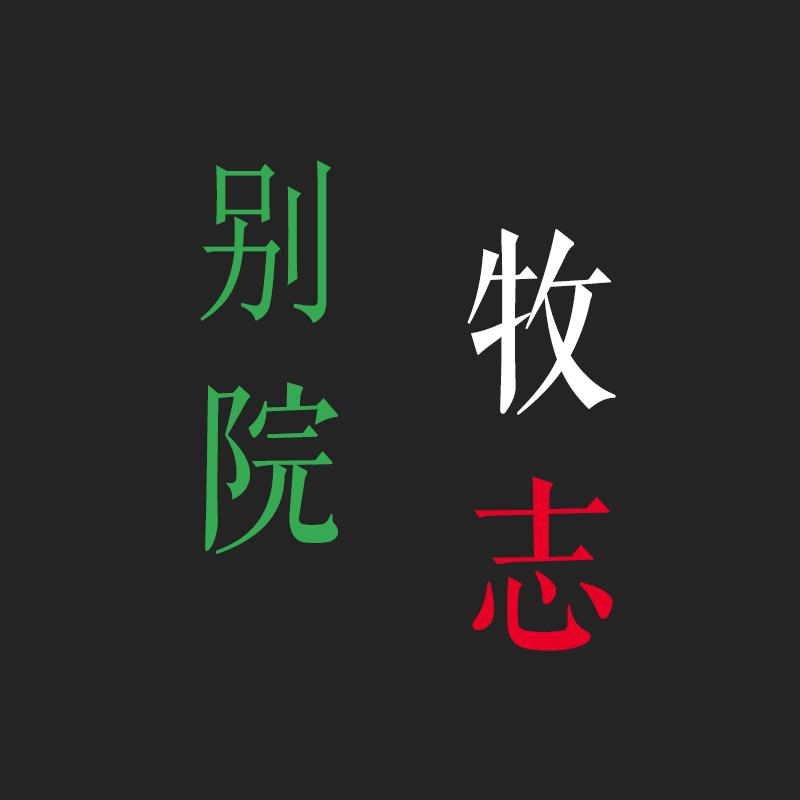
<style>
.page{position:relative;width:800px;height:800px;background:#242424}
.page>*{position:absolute;margin:0}
.t1{font:150px/0px "SimSun";letter-spacing:0.261em;color:#35aa53;scale:1.2 1}
.t2{font:150px/0px "FZQKBYSJW--GB1-0";letter-spacing:0.261em;color:#35aa53;scale:1.2 1}
.t3{font:160px "FZQKBYSJW--GB1-0";letter-spacing:0.261em;color:#ffffff;scale:1.2 1}
.t4{font:160px "FZQKBYSJW--GB1-0";letter-spacing:0.261em;color:#e60026;scale:1.2 1}
</style>
<div class="page">
<p class="t1" style="left:200px;top:160px;width:138px;height:394px;text-align:center">别<span class="t2">院</span></p>
<p class="t3" style="left:467px;top:228px;width:149px;height:423px;text-align:center">牧<span class="t4">志</span></p>
</div>
